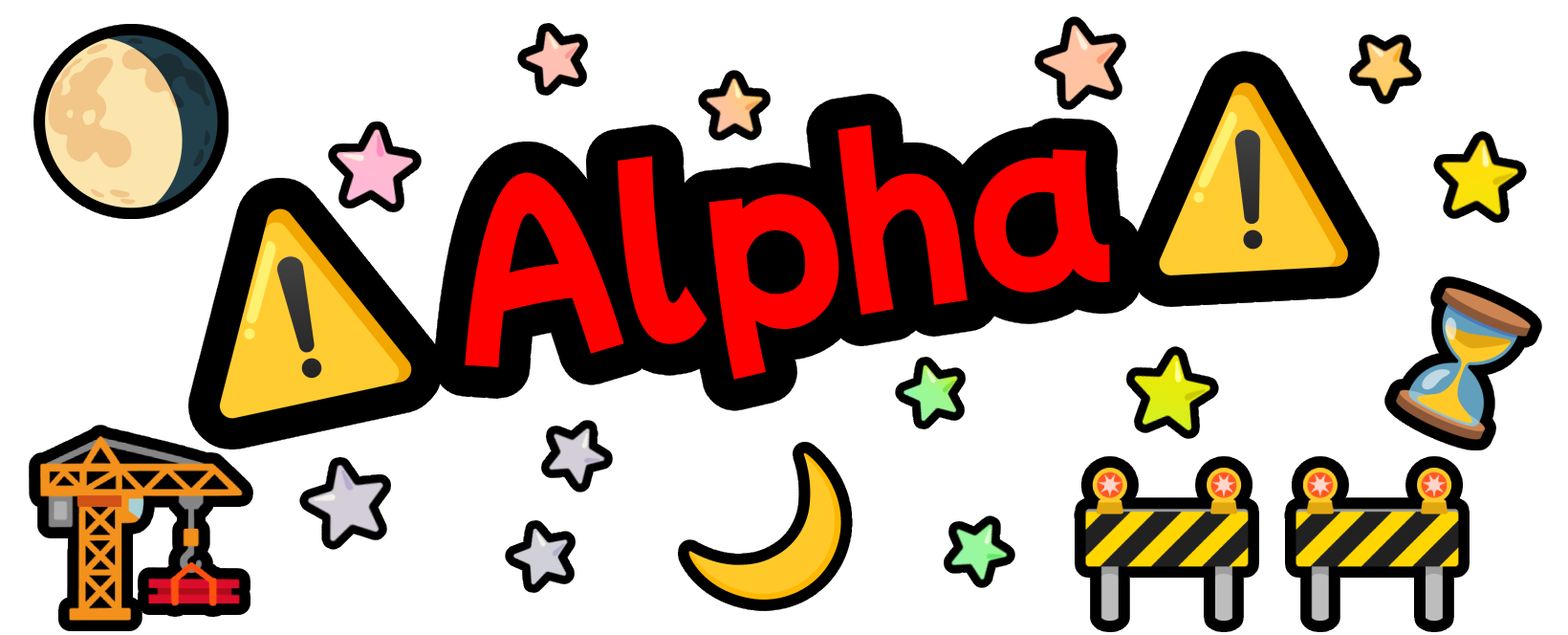
<style>
.page{position:relative;width:1568px;height:635px;background:#ffffff}
.page>*{position:absolute;margin:0}
.t1{font:213.3px "MochiyPopOne-Regular";color:#ff0000;scale:0.91 1}
</style>
<div class="page">
<p class="t1" style="left:465px;top:124px;width:645px;height:256px;rotate:-8deg">Alpha</p>
</div>
